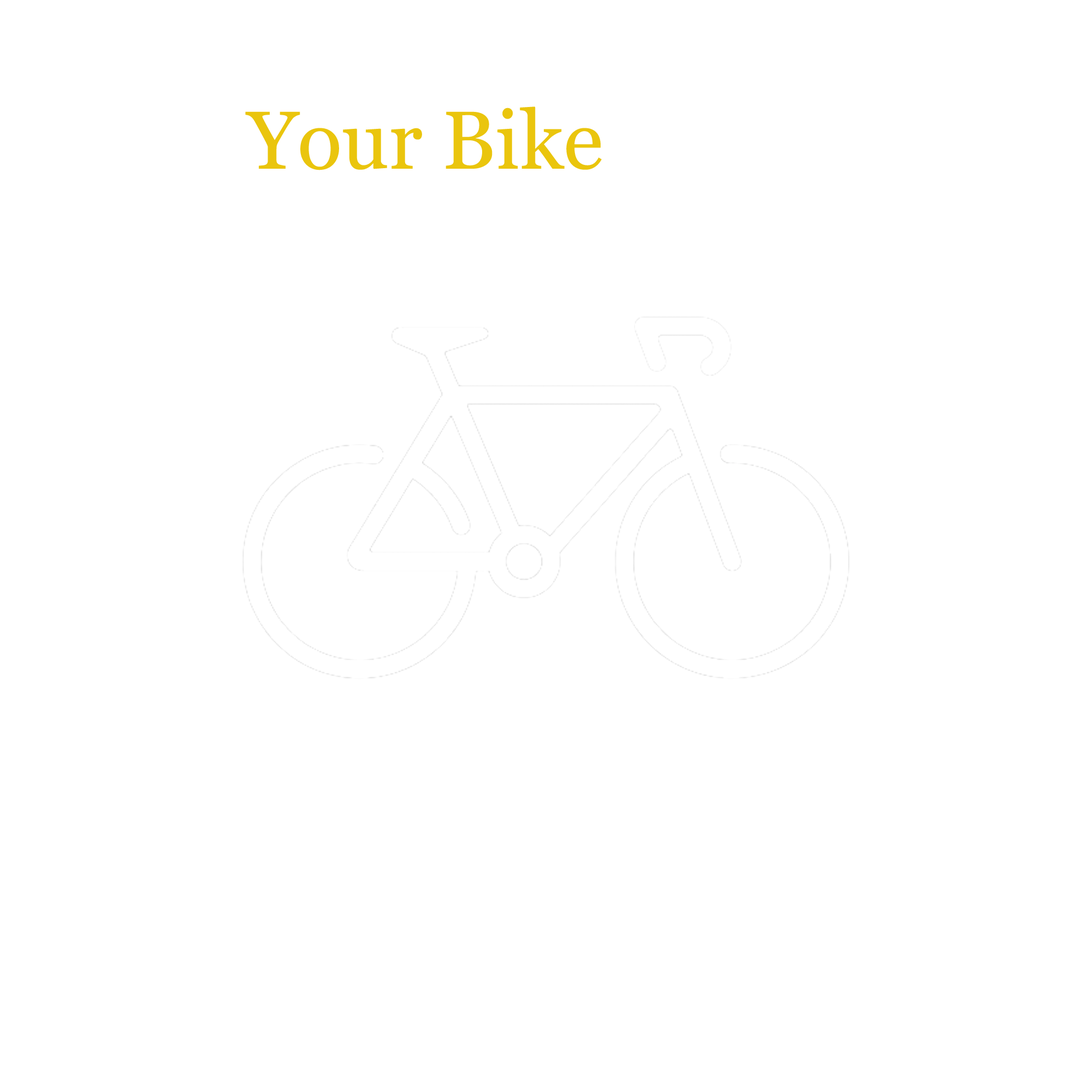
<style>
.page{position:relative;width:1092px;height:1092px;background:#ffffff}
.page>*{position:absolute;margin:0}
.t1{font:81.9px "Georgia";color:#eac50d}
</style>
<div class="page">
<p class="t1" style="left:245px;top:106px;width:357px;height:64px">Your Bike</p>
</div>
